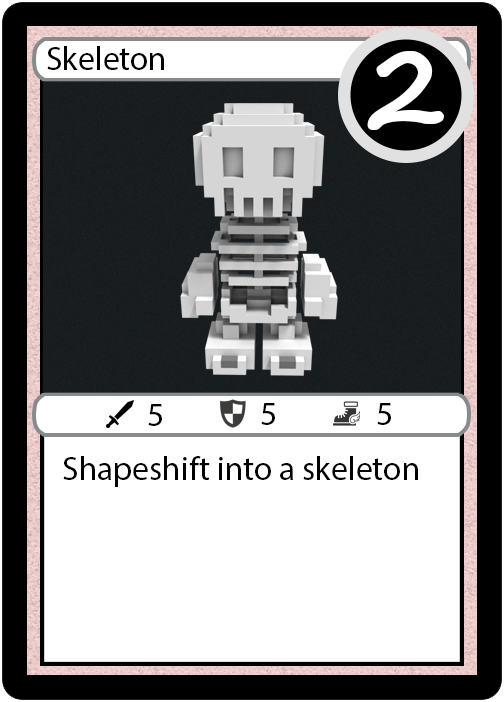
<style>
.page{position:relative;width:504px;height:702px;background:#ffffff}
.page>*{position:absolute;margin:0}
.t1{font:33.3px "MyriadPro-Regular";color:#000000}
.t2{font:111px "SegoeScript-Bold";color:#ffffff}
</style>
<div class="page">
<p class="t1" style="left:47px;top:46px;width:117px;height:24px">Skeleton</p>
<p class="t2" style="left:367px;top:51px;width:77px;height:79px">2</p>
<p class="t1" style="left:148px;top:404px;width:14px;height:22px">5</p>
<p class="t1" style="left:261px;top:403px;width:14px;height:22px">5</p>
<p class="t1" style="left:377px;top:403px;width:14px;height:22px">5</p>
<p class="t1" style="left:63px;top:456px;width:355px;height:31px">Shapeshift into a skeleton</p>
</div>
